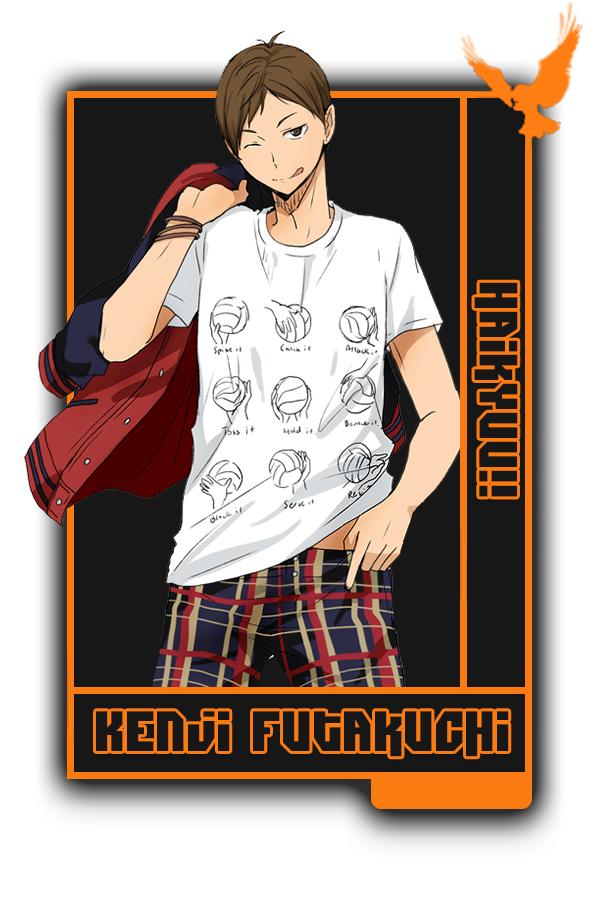
<style>
.page{position:relative;width:600px;height:900px;background:#ffffff}
.page>*{position:absolute;margin:0}
.t1{font:53.7px "Dimitri";color:#171717}
.t2{font:56.5px "Dimitri";color:#171717}
</style>
<div class="page">
<p class="t1" style="left:474px;top:282px;width:44px;height:215px;rotate:90deg">Haikyuu!!</p>
<p class="t2" style="left:96px;top:711px;width:413px;height:46px">Kenji Futakuchi</p>
</div>
